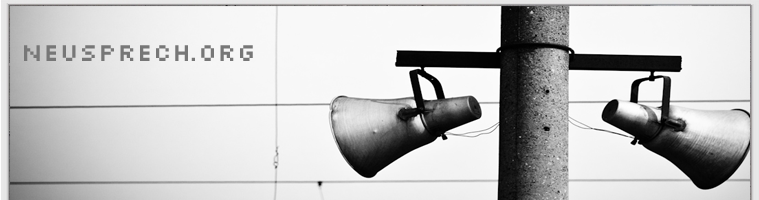
<style>
.page{position:relative;width:759px;height:200px}
.page>*{position:absolute;margin:0}
.t1{font:26.7px "Silkscreen";letter-spacing:0.01em;color:#777777}
</style>
<div class="page">
<p class="t1" style="left:24px;top:45px;width:229px;height:16px">neusprech.org</p>
</div>
